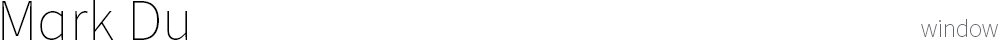
<style>
.page{position:relative;width:1000px;height:40px;background:#ffffff}
.page>*{position:absolute;margin:0}
.t1{font:58.3px "SourceSansPro-ExtraLight";letter-spacing:0.01em;color:#000000}
.t2{font:25px "SourceSansPro-ExtraLight";letter-spacing:-0.01em;color:#63656a}
</style>
<div class="page">
<p class="t1" style="left:2px;top:0px;width:185px;height:40px">Mark Du</p>
<p class="t2" style="left:921px;top:19px;width:77px;height:18px">window</p>
</div>
